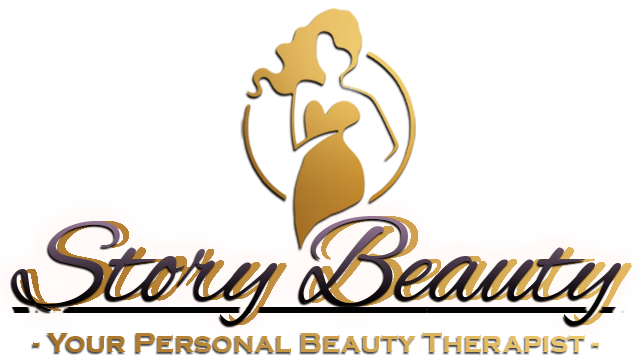
<style>
.page{position:relative;width:643px;height:360px;background:#ffffff}
.page>*{position:absolute;margin:0}
.t1{font:124.3px "AlexBrush-Regular"}
.t2{font:29px "CopperplateGothic-Bold"}
</style>
<div class="page">
<p class="t1" style="left:11px;top:216px;width:611px;height:109px">Story Beauty</p>
<p class="t1" style="left:20px;top:216px;width:612px;height:109px">Story Beauty</p>
<p class="t1" style="left:20px;top:216px;width:612px;height:109px">Story Beauty</p>
<p class="t1" style="left:20px;top:216px;width:612px;height:109px">Story Beauty</p>
<p class="t1" style="left:20px;top:216px;width:612px;height:109px">Story Beauty</p>
<p class="t1" style="left:20px;top:216px;width:612px;height:109px">Story Beauty</p>
<p class="t1" style="left:20px;top:216px;width:612px;height:109px">Story Beauty</p>
<p class="t1" style="left:20px;top:216px;width:612px;height:109px">Story Beauty</p>
<p class="t1" style="left:20px;top:216px;width:612px;height:109px">Story Beauty</p>
<p class="t1" style="left:20px;top:216px;width:612px;height:109px">Story Beauty</p>
<p class="t1" style="left:20px;top:216px;width:612px;height:109px">Story Beauty</p>
<p class="t1" style="left:20px;top:216px;width:612px;height:109px">Story Beauty</p>
<p class="t1" style="left:20px;top:216px;width:612px;height:109px">Story Beauty</p>
<p class="t1" style="left:20px;top:216px;width:612px;height:109px">Story Beauty</p>
<p class="t1" style="left:20px;top:216px;width:612px;height:109px">Story Beauty</p>
<p class="t1" style="left:20px;top:216px;width:612px;height:109px">Story Beauty</p>
<p class="t1" style="left:20px;top:216px;width:612px;height:109px">Story Beauty</p>
<p class="t1" style="left:20px;top:216px;width:612px;height:109px">Story Beauty</p>
<p class="t1" style="left:20px;top:216px;width:612px;height:109px">Story Beauty</p>
<p class="t1" style="left:20px;top:216px;width:612px;height:109px">Story Beauty</p>
<p class="t1" style="left:20px;top:216px;width:612px;height:109px">Story Beauty</p>
<p class="t1" style="left:20px;top:216px;width:612px;height:109px">Story Beauty</p>
<p class="t1" style="left:20px;top:216px;width:612px;height:109px">Story Beauty</p>
<p class="t1" style="left:20px;top:216px;width:612px;height:109px">Story Beauty</p>
<p class="t1" style="left:20px;top:216px;width:612px;height:109px">Story Beauty</p>
<p class="t1" style="left:20px;top:216px;width:612px;height:109px">Story Beauty</p>
<p class="t1" style="left:20px;top:216px;width:612px;height:109px">Story Beauty</p>
<p class="t1" style="left:20px;top:216px;width:612px;height:109px">Story Beauty</p>
<p class="t1" style="left:20px;top:216px;width:612px;height:109px">Story Beauty</p>
<p class="t2" style="left:33px;top:332px;width:566px;height:21px">- Your Personal Beauty Therapist -</p>
</div>
